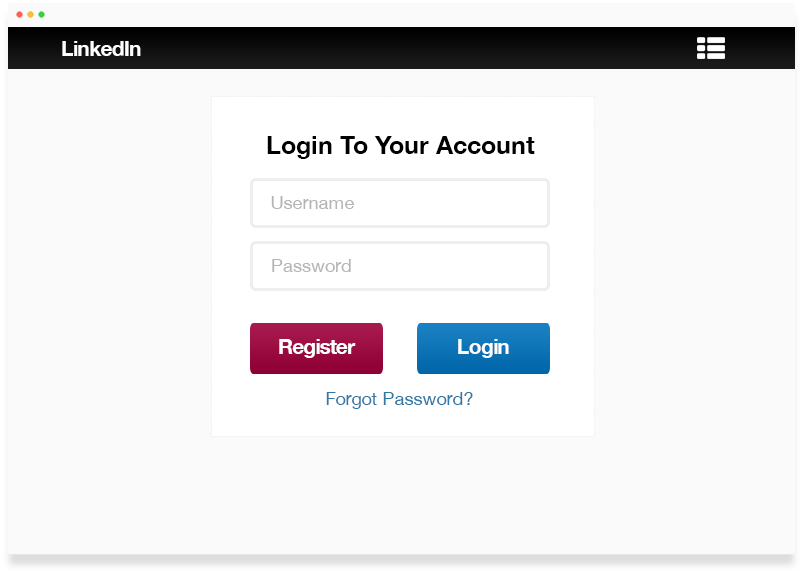
<style>
.page{position:relative;width:803px;height:574px;background:#fafafa}
.page>*{position:absolute;margin:0}
.t1{font:21.3px "HelveticaNeue-Bold";letter-spacing:-0.04em;color:#ffffff}
.t2{font:25.3px "HelveticaNeue-Bold";color:#000000}
.t3{font:18.3px "HelveticaNeue";color:#b5b5b5}
.t4{font:18.3px "HelveticaNeue";color:#3378a4}
</style>
<div class="page">
<p class="t1" style="left:62px;top:41px;width:79px;height:15px">LinkedIn</p>
<p class="t2" style="left:267px;top:136px;width:268px;height:23px">Login To Your Account</p>
<p class="t3" style="left:271px;top:196px;width:83px;height:13px">Username</p>
<p class="t3" style="left:272px;top:259px;width:79px;height:13px">Password</p>
<p class="t1" style="left:279px;top:339px;width:77px;height:19px">Register</p>
<p class="t1" style="left:458px;top:339px;width:51px;height:19px">Login</p>
<p class="t4" style="left:326px;top:392px;width:147px;height:17px">Forgot Password?</p>
</div>
